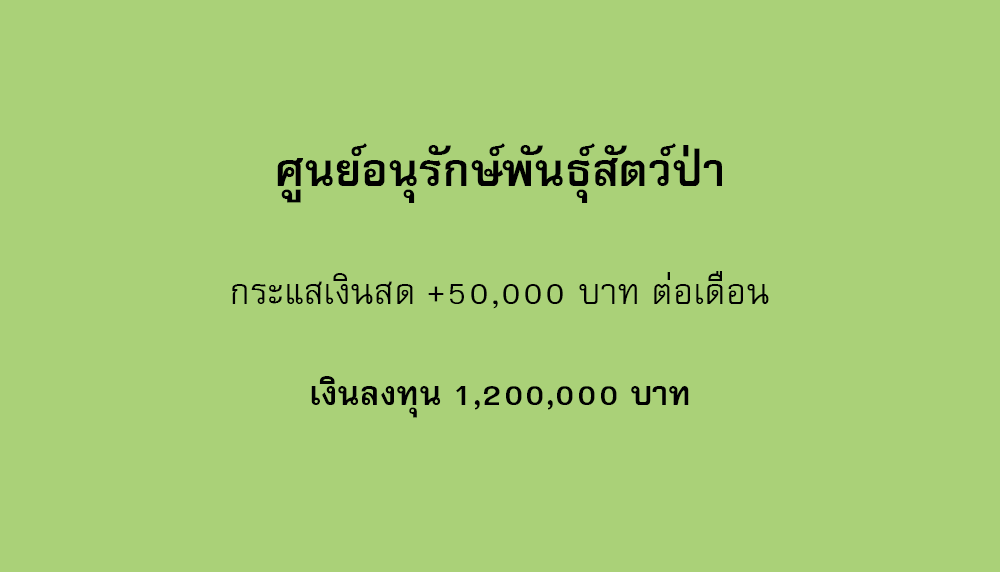
<style>
.page{position:relative;width:1000px;height:572px;background:#aad178}
.page>*{position:absolute;margin:0}
.t1{font:64px "FreesiaUPCBold";color:#000000}
.t2{font:50px "FreesiaUPC";color:#000000}
.t3{font:47px "FreesiaUPCBold";color:#000000}
</style>
<div class="page">
<p class="t1" style="left:277px;top:143px;width:445px;height:60px">ศูนย์อนุรักษ์พันธุ์สัตว์ป่า</p>
<p class="t2" style="left:232px;top:271px;width:537px;height:38px">กระแสเงินสด +50,000 บาท ต่อเดือน</p>
<p class="t3" style="left:311px;top:376px;width:378px;height:42px">เงินลงทุน 1,200,000 บาท</p>
</div>
